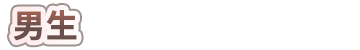
<style>
.page{position:relative;width:360px;height:50px;background:#ffffff}
.page>*{position:absolute;margin:0}
.t1{font:32px "SourceHanSansSC-Bold";font-weight:bold}
</style>
<div class="page">
<p class="t1" style="left:13px;top:10px;width:64px;height:31px">男生</p>
</div>
